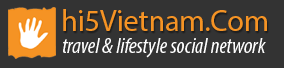
<style>
.page{position:relative;width:284px;height:68px;background:#333333}
.page>*{position:absolute;margin:0}
.t1{font:30px "MyriadPro-Regular";color:#f59324}
.t2{font:22px "MyriadPro-CondIt";color:#ffffff}
</style>
<div class="page">
<p class="t1" style="left:63px;top:9px;width:204px;height:22px">hi5Vietnam.Com</p>
<p class="t2" style="left:63px;top:38px;width:203px;height:20px">travel &amp; lifestyle social network</p>
</div>
